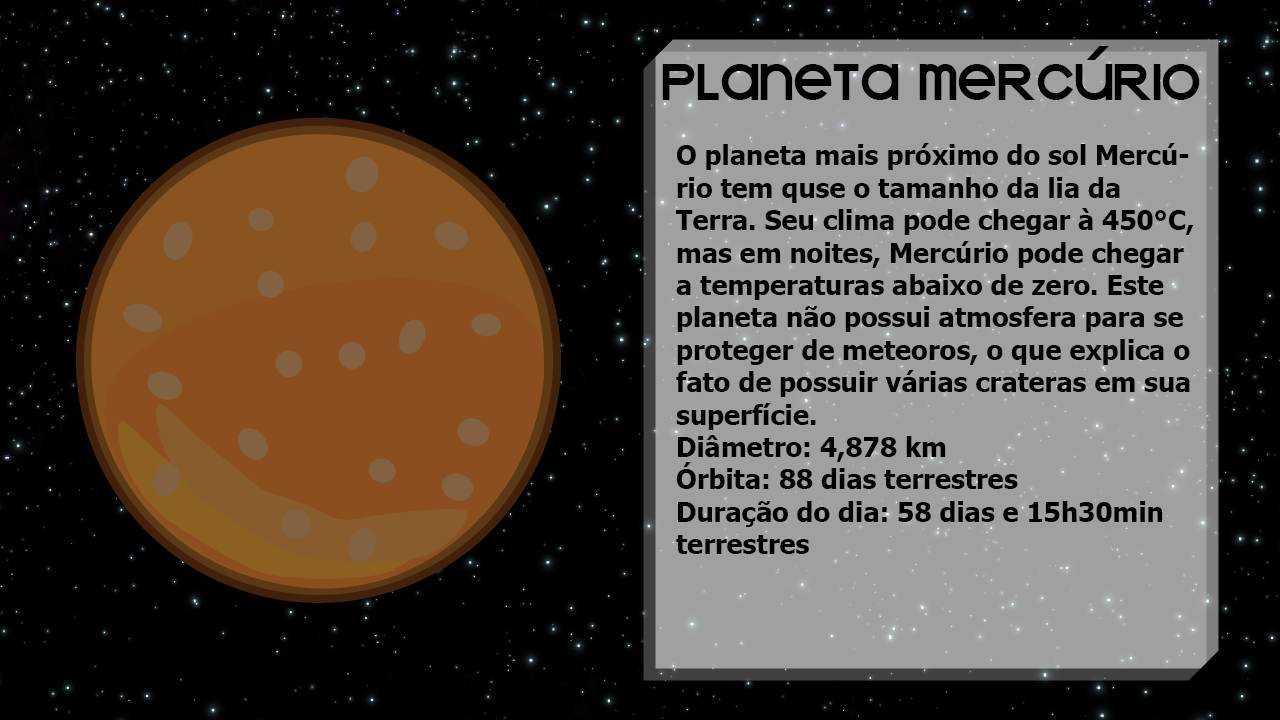
<style>
.page{position:relative;width:1280px;height:720px;background:#000000}
.page>*{position:absolute;margin:0}
.t1{font:58px "KravitzExtraThermal";color:#000000}
.t2{font:27px "Tahoma-Bold";color:#000000}
</style>
<div class="page">
<p class="t1" style="left:662px;top:46px;width:538px;height:54px">PLANETA MERCÚRIO</p>
<p class="t2" style="left:676px;top:143px;width:518px;height:411px">O planeta mais próximo do sol Mercúrio tem quse o tamanho da lia da Terra. Seu clima pode chegar à 450°C, mas em noites, Mercúrio pode chegar a temperaturas abaixo de zero. Este planeta não possui atmosfera para se proteger de meteoros, o que explica o fato de possuir várias crateras em sua superfície. <br>Diâmetro: 4,878 km<br>Órbita: 88 dias terrestres<br>Duração do dia: 58 dias e 15h30min terrestres</p>
</div>
